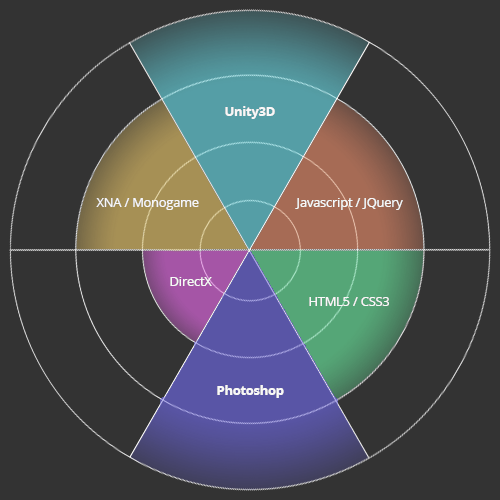
<style>
.page{position:relative;width:500px;height:500px;background:#333333}
.page>*{position:absolute;margin:0}
.t1{font:12.5px "OpenSans-Bold";color:#ffffff}
.t2{font:12.5px "OpenSans";color:#ffffff}
</style>
<div class="page">
<p class="t1" style="left:225px;top:106px;width:50px;height:13px">Unity3D</p>
<p class="t2" style="left:96px;top:198px;width:103px;height:12px">XNA / Monogame</p>
<p class="t2" style="left:295px;top:198px;width:108px;height:12px">Javascript / JQuery</p>
<p class="t2" style="left:170px;top:277px;width:42px;height:9px">DirectX</p>
<p class="t2" style="left:309px;top:297px;width:80px;height:9px">HTML5 / CSS3</p>
<p class="t1" style="left:217px;top:385px;width:67px;height:13px">Photoshop</p>
</div>
